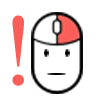
<style>
.page{position:relative;width:100px;height:100px;background:#ffffff}
.page>*{position:absolute;margin:0}
.t1{font:150.9px "MicrosoftHimalaya";letter-spacing:0.16em;color:#fb5e58}
</style>
<div class="page">
<p class="t1" style="left:12px;top:15px;width:12px;height:71px">!</p>
</div>
